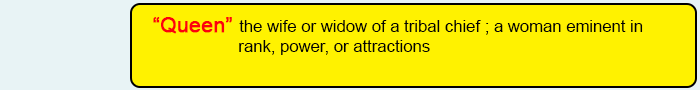
<style>
.page{position:relative;width:700px;height:90px;background:#fff200}
.page>*{position:absolute;margin:0}
.t1{font:16.7px "ArialMT";color:#020202}
.t2{font:20.8px "ArialMT";color:#fd010d;font-weight:bold}
</style>
<div class="page">
<p class="t1" style="left:153px;top:17px;width:490px;height:38px"><span class="t2">“Queen” </span>the wife or widow of a tribal chief ; a woman eminent in <br>     rank, power, or attractions</p>
</div>
